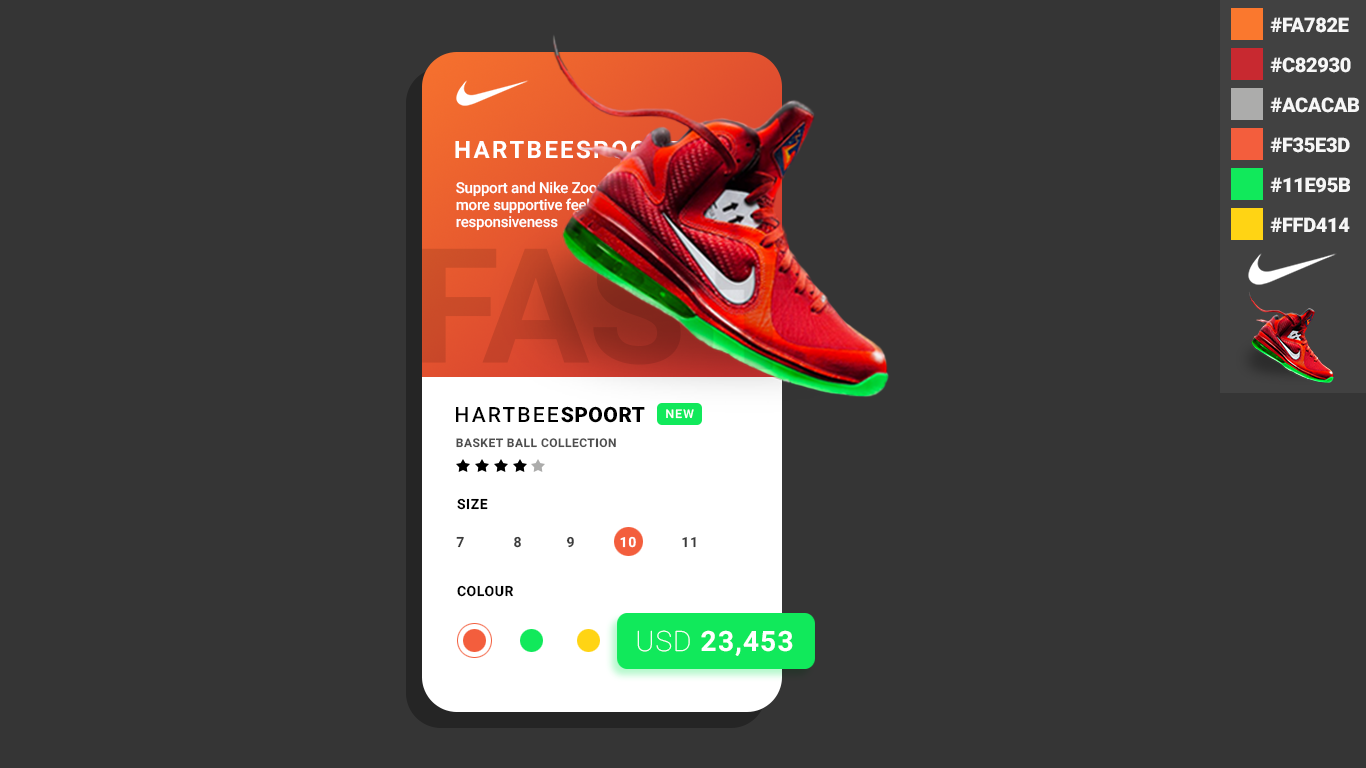
<style>
.page{position:relative;width:1366px;height:768px;background:#353535}
.page>*{position:absolute;margin:0}
.t1{font:20px "Roboto-Black";letter-spacing:-0.015em;color:#f6f6f6}
.t2{font:24px "Roboto-Bold";letter-spacing:0.1em;color:#ffffff}
.t3{font:15px/17px "Roboto-Medium";letter-spacing:-0.015em}
.t4{font:21px "Roboto-Medium";letter-spacing:0.1em;color:#000000}
.t5{font:21px "Roboto-Black";letter-spacing:0.02em;color:#000000}
.t6{font:12px "Roboto-Medium";letter-spacing:0.1em;color:#ffffff}
.t7{font:12px "Roboto-Bold";letter-spacing:0.04em;color:#4e4e4e}
.t8{font:14px "Roboto-Bold";letter-spacing:0.04em;color:#000000}
.t9{font:14px "Roboto-Bold";letter-spacing:0.04em;color:#3b3b3b}
.t10{font:14px "Roboto-Bold";letter-spacing:0.04em;color:#ffffff}
.t11{font:28px "Roboto-Bold";letter-spacing:0.04em;color:#ffffff}
.t12{font:28px "Roboto-Thin";letter-spacing:0.04em;color:#ffffff}
</style>
<div class="page">
<p class="t1" style="left:1270px;top:17px;width:79px;height:16px">#FA782E</p>
<p class="t1" style="left:1270px;top:57px;width:81px;height:16px">#C82930</p>
<p class="t1" style="left:1270px;top:97px;width:89px;height:16px">#ACACAB</p>
<p class="t1" style="left:1270px;top:137px;width:80px;height:16px">#F35E3D</p>
<p class="t2" style="left:455px;top:140px;width:226px;height:19px">HARTBEESPOORT</p>
<p class="t3" style="left:456px;top:181px;width:307px;height:50px">Support and Nike Zoom Air come together for a <br>more supportive feel with high-speed <br>responsiveness</p>
<p class="t1" style="left:1270px;top:177px;width:80px;height:16px">#11E95B</p>
<p class="t1" style="left:1270px;top:217px;width:80px;height:15px">#FFD414</p>
<p class="t4" style="left:456px;top:406px;width:189px;height:17px">HARTBEE<span class="t5">SPOORT</span></p>
<p class="t6" style="left:666px;top:409px;width:28px;height:10px">NEW</p>
<p class="t7" style="left:456px;top:438px;width:160px;height:10px">BASKET BALL COLLECTION</p>
<p class="t8" style="left:457px;top:498px;width:31px;height:12px">SIZE</p>
<p class="t9" style="left:456px;top:536px;width:240px;height:12px">7            8           9           <span class="t10">10 </span>          11</p>
<p class="t8" style="left:457px;top:585px;width:57px;height:12px">COLOUR</p>
<p class="t11" style="left:637px;top:630px;width:156px;height:26px"><span class="t12">USD</span> 23,453</p>
</div>
